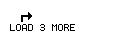
<style>
.page{position:relative;width:128px;height:32px;background:#ffffff}
.page>*{position:absolute;margin:0}
.t1{font:10px "Terminal";color:#000000}
</style>
<div class="page">
<p class="t1" style="left:10px;top:24px;width:65px;height:7px">LOAD 3 MORE</p>
</div>
